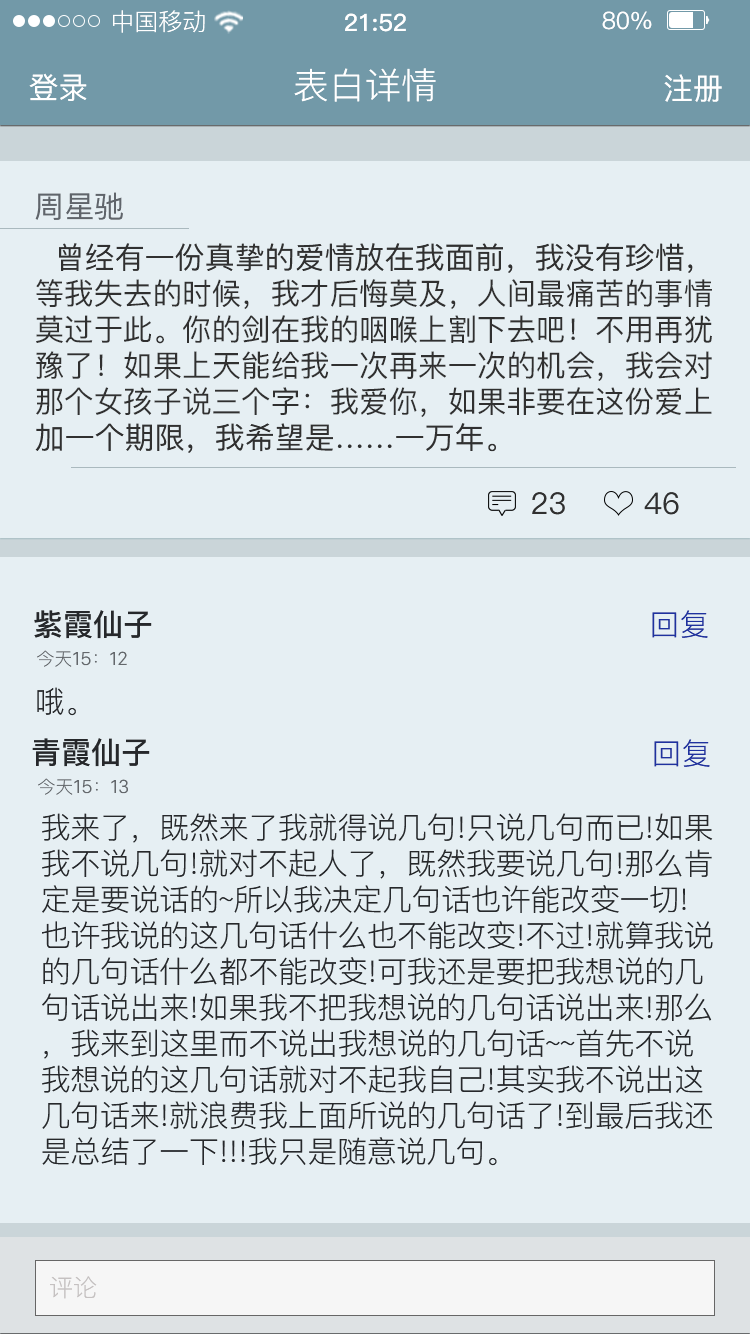
<style>
.page{position:relative;width:750px;height:1334px;background:#e6eff3}
.page>*{position:absolute;margin:0}
.t1{font:24px "PingFang-SC-Regular";color:#ffffff}
.t2{font:24px "PingFang-SC-Bold";color:#ffffff}
.t3{font:24px "PingFang-SC-Medium";color:#ffffff}
.t4{font:30px "PingFang-SC-Medium";color:#ffffff}
.t5{font:36px "PingFang-SC-Regular";color:#ffffff}
.t6{font:30px "PingFang-SC-Medium";color:#60656b}
.t7{font:30px "PingFang-SC-Medium";color:#303030}
.t8{font:30px "PingFang-SC-Bold";color:#26282b}
.t9{font:30px "PingFang-SC-Regular";color:#1f329f}
.t10{font:18px "PingFang-SC-Regular";color:#64686c}
.t11{font:18px "HelveticaNeueDeskInterface-Regular";color:#64686c}
.t12{font:30px "PingFang-SC-Regular";color:#26282b}
.t13{font:24px "PingFang-SC-Regular";color:#c5c1c1}
</style>
<div class="page">
<p class="t1" style="left:113px;top:10px;width:92px;height:23px">中国移动</p>
<p class="t2" style="left:345px;top:13px;width:61px;height:19px">21:52</p>
<p class="t3" style="left:602px;top:11px;width:50px;height:19px">80%</p>
<p class="t4" style="left:29px;top:73px;width:58px;height:28px">登录</p>
<p class="t5" style="left:294px;top:68px;width:142px;height:34px">表白详情</p>
<p class="t4" style="left:664px;top:74px;width:58px;height:28px">注册</p>
<p class="t6" style="left:35px;top:192px;width:88px;height:28px">周星驰</p>
<p class="t7" style="left:35px;top:243px;width:677px;height:210px">曾经有一份真挚的爱情放在我面前，我没有珍惜，<br>等我失去的时候，我才后悔莫及，人间最痛苦的事情<br>莫过于此。你的剑在我的咽喉上割下去吧！不用再犹<br>豫了！如果上天能给我一次再来一次的机会，我会对<br>那个女孩子说三个字：我爱你，如果非要在这份爱上<br>加一个期限，我希望是……一万年。</p>
<p class="t7" style="left:532px;top:492px;width:33px;height:23px">23</p>
<p class="t7" style="left:644px;top:492px;width:35px;height:23px">46</p>
<p class="t8" style="left:34px;top:610px;width:118px;height:29px">紫霞仙子</p>
<p class="t9" style="left:652px;top:610px;width:56px;height:28px">回复</p>
<p class="t10" style="left:37px;top:650px;width:90px;height:17px">今天<span class="t11">15</span>：<span class="t11">12</span></p>
<p class="t12" style="left:37px;top:687px;width:39px;height:29px">哦。</p>
<p class="t8" style="left:32px;top:738px;width:118px;height:29px">青霞仙子</p>
<p class="t9" style="left:654px;top:739px;width:56px;height:28px">回复</p>
<p class="t10" style="left:38px;top:778px;width:90px;height:17px">今天<span class="t11">15</span>：<span class="t11">13</span></p>
<p class="t12" style="left:42px;top:813px;width:671px;height:353px">我来了，既然来了我就得说几句!只说几句而已!如果我不说几句!就对不起人了，既然我要说几句!那么肯定是要说话的~所以我决定几句话也许能改变一切!也许我说的这几句话什么也不能改变!不过!就算我说的几句话什么都不能改变!可我还是要把我想说的几句话说出来!如果我不把我想说的几句话说出来!那么，我来到这里而不说出我想说的几句话~~首先不说我想说的这几句话就对不起我自己!其实我不说出这几句话来!就浪费我上面所说的几句话了!到最后我还是总结了一下!!!我只是随意说几句。</p>
<p class="t13" style="left:50px;top:1276px;width:47px;height:23px">评论</p>
</div>
